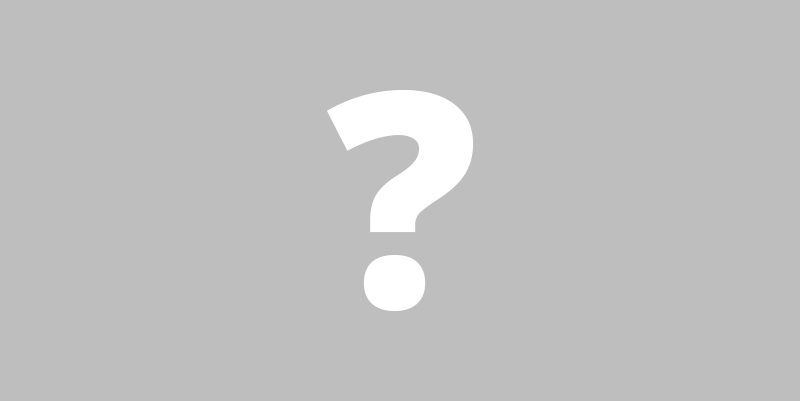
<style>
.page{position:relative;width:800px;height:401px;background:#bebebe}
.page>*{position:absolute;margin:0}
.t1{font:300px "OpenSans-Extrabold";color:#ffffff}
</style>
<div class="page">
<p class="t1" style="left:327px;top:90px;width:147px;height:221px">?</p>
</div>
